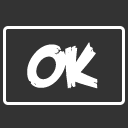
<style>
.page{position:relative;width:128px;height:128px;background:#333333}
.page>*{position:absolute;margin:0}
.t1{font:60px "FeastofFleshBB";color:#ffffff;font-weight:bold}
</style>
<div class="page">
<p class="t1" style="left:27px;top:42px;width:71px;height:47px">OK</p>
</div>
